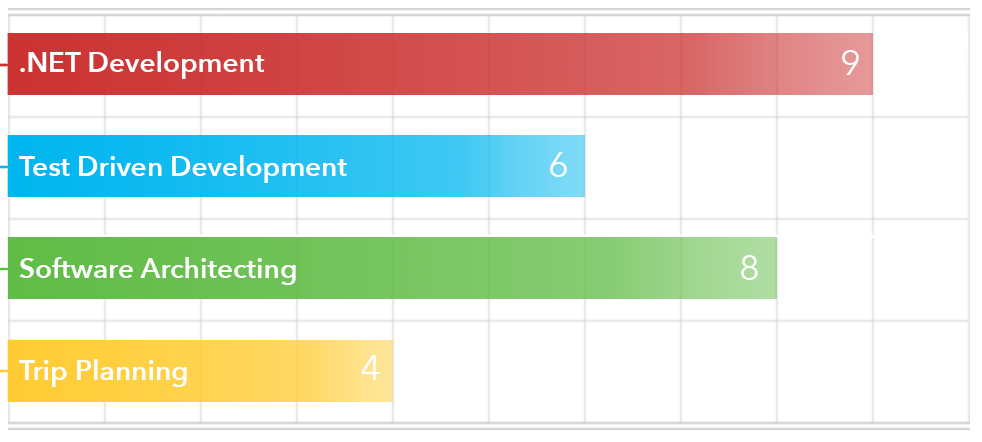
<style>
.page{position:relative;width:982px;height:442px;background:#ffffff}
.page>*{position:absolute;margin:0}
.t1{font:28px "AvenirNext-DemiBold";color:#ffffff}
.t2{font:36px "AvenirNext-Regular";color:#ffffff}
</style>
<div class="page">
<p class="t1" style="left:20px;top:51px;width:245px;height:28px">.NET Development</p>
<p class="t2" style="left:842px;top:50px;width:17px;height:25px">9</p>
<p class="t1" style="left:19px;top:155px;width:328px;height:28px">Test Driven Development</p>
<p class="t2" style="left:550px;top:152px;width:17px;height:25px">6</p>
<p class="t1" style="left:19px;top:257px;width:277px;height:28px">Software Architecting</p>
<p class="t2" style="left:741px;top:255px;width:17px;height:25px">8</p>
<p class="t1" style="left:19px;top:359px;width:168px;height:28px">Trip Planning</p>
<p class="t2" style="left:361px;top:355px;width:19px;height:25px">4</p>
</div>
